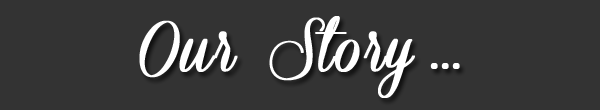
<style>
.page{position:relative;width:600px;height:110px;background:#333333}
.page>*{position:absolute;margin:0}
.t1{font:60px "ConeriaScriptDemo";color:#ffffff;font-weight:bold}
</style>
<div class="page">
<p class="t1" style="left:139px;top:16px;width:321px;height:82px">Our Story ...</p>
</div>
